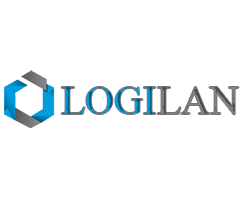
<style>
.page{position:relative;width:250px;height:200px;background:#ffffff}
.page>*{position:absolute;margin:0}
.t1{font:40px "TimesNewRomanPSMT";color:#009cdd}
.t2{font:40px "TimesNewRomanPSMT";color:#818285}
</style>
<div class="page">
<p class="t1" style="left:61px;top:87px;width:178px;height:28px">LOGI<span class="t2">LAN</span></p>
</div>
